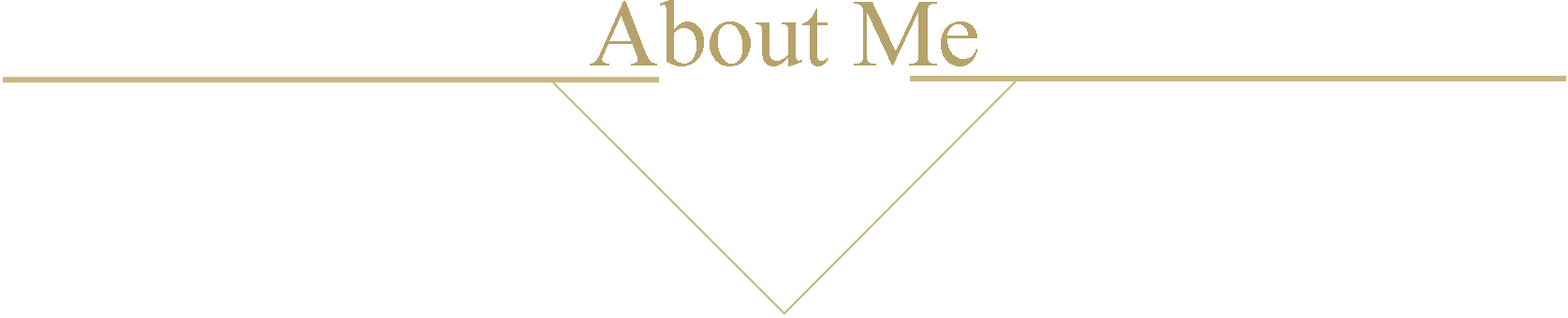
<style>
.page{position:relative;width:1568px;height:318px;background:#ffffff}
.page>*{position:absolute;margin:0}
.t1{font:95.5px "TimesNewRomanPSMT";color:#b5a36a}
</style>
<div class="page">
<p class="t1" style="left:590px;top:0px;width:387px;height:66px">About Me</p>
</div>
